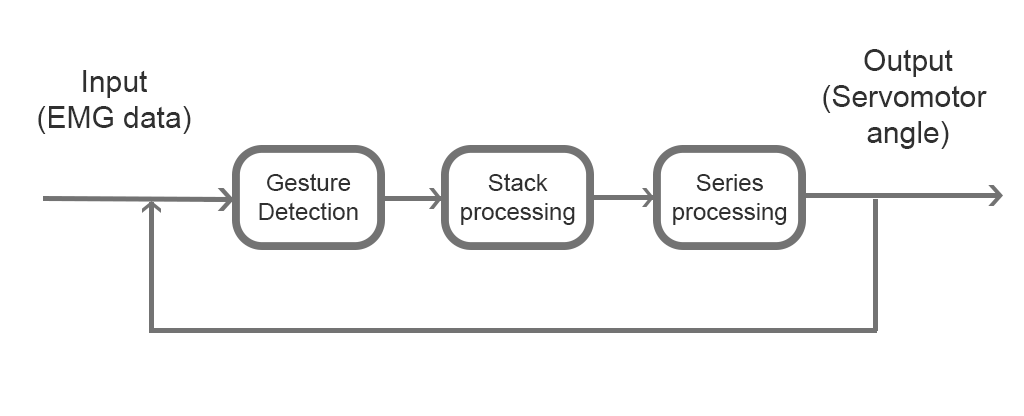
<style>
.page{position:relative;width:1024px;height:416px;background:#ffffff}
.page>*{position:absolute;margin:0}
.t1{font:30px "ArialMT";color:#303030}
.t2{font:24px "ArialMT";color:#303030}
</style>
<div class="page">
<p class="t1" style="left:823px;top:49px;width:164px;height:100px;text-align:center">Output<br>(Servomotor <br>angle)</p>
<p class="t1" style="left:38px;top:70px;width:153px;height:64px;text-align:center">Input<br>(EMG data)</p>
<p class="t2" style="left:259px;top:173px;width:99px;height:47px;text-align:center">Gesture<br>Detection</p>
<p class="t2" style="left:461px;top:173px;width:114px;height:52px;text-align:center">Stack<br>processing</p>
<p class="t2" style="left:673px;top:174px;width:114px;height:51px;text-align:center">Series<br>processing</p>
</div>
